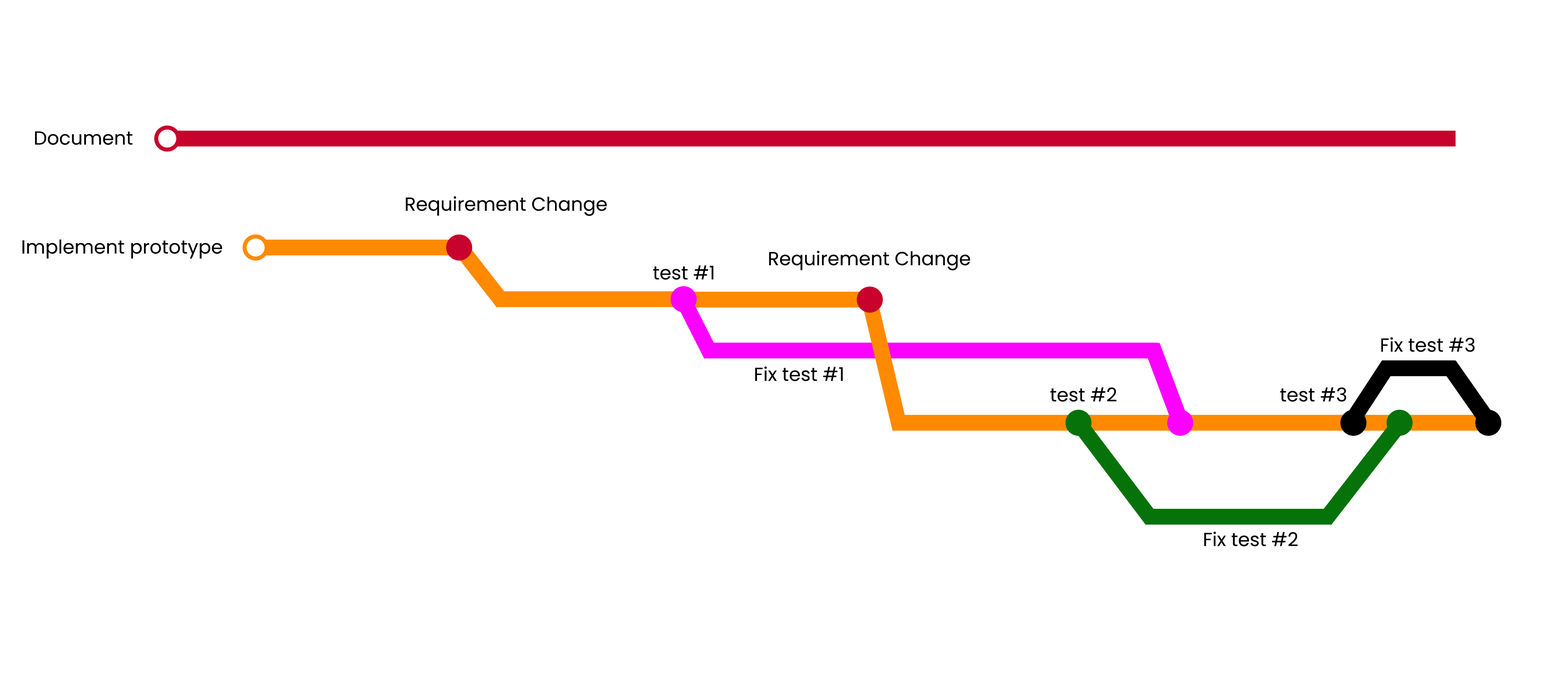
<style>
.page{position:relative;width:1568px;height:690px;background:#ffffff}
.page>*{position:absolute;margin:0}
.t1{font:18.9px "Poppins-Regular";color:#000000}
</style>
<div class="page">
<p class="t1" style="left:35px;top:131px;width:98px;height:14px">Document</p>
<p class="t1" style="left:406px;top:196px;width:201px;height:20px">Requirement Change</p>
<p class="t1" style="left:22px;top:239px;width:200px;height:19px">Implement prototype</p>
<p class="t1" style="left:769px;top:250px;width:201px;height:20px">Requirement Change</p>
<p class="t1" style="left:653px;top:265px;width:61px;height:15px">test #1</p>
<p class="t1" style="left:1381px;top:337px;width:94px;height:15px">Fix test #3</p>
<p class="t1" style="left:755px;top:366px;width:88px;height:15px">Fix test #1</p>
<p class="t1" style="left:1050px;top:387px;width:67px;height:15px">test #2</p>
<p class="t1" style="left:1280px;top:387px;width:66px;height:15px">test #3</p>
<p class="t1" style="left:1204px;top:531px;width:94px;height:15px">Fix test #2</p>
</div>
